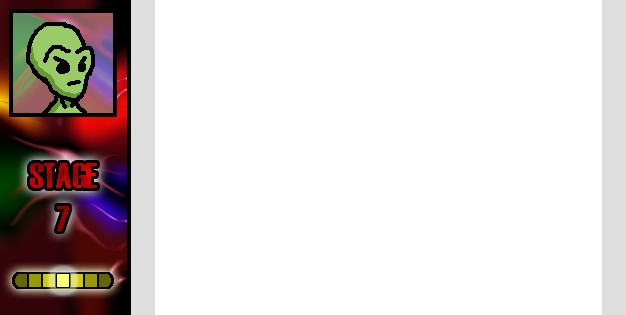
<style>
.page{position:relative;width:626px;height:315px;background:#ffffff}
.page>*{position:absolute;margin:0}
.t1{font:36px "Haettenschweiler"}
</style>
<div class="page">
<p class="t1" style="left:30px;top:163px;width:67px;height:68px;text-align:center">STAGE<br>7</p>
</div>
